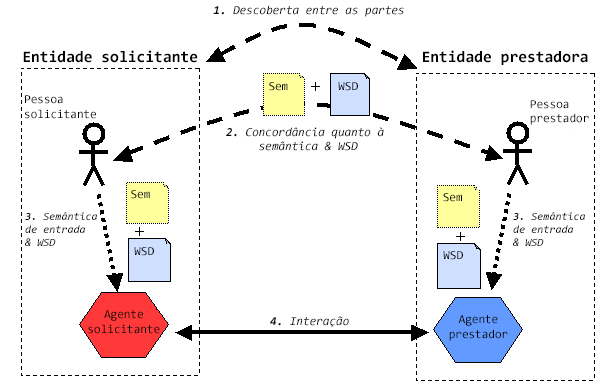
<style>
.page{position:relative;width:609px;height:391px;background:#ffffff}
.page>*{position:absolute;margin:0}
.t1{font:12px "Consolas-Italic";color:#000000}
.t2{font:12px "Consolas-BoldItalic";color:#000000}
.t3{font:16px "Consolas-Bold";color:#000000}
.t4{font:12px "Consolas";color:#000000}
.t5{font:11px "Consolas-Italic";color:#000000}
.t6{font:11px "Consolas-BoldItalic";color:#000000}
</style>
<div class="page">
<p class="t1" style="left:213px;top:5px;width:191px;height:12px"><span class="t2">1.</span> Descoberta entre as partes</p>
<p class="t3" style="left:23px;top:50px;width:175px;height:13px">Entidade solicitante</p>
<p class="t3" style="left:423px;top:50px;width:165px;height:15px">Entidade prestadora</p>
<p class="t4" style="left:269px;top:82px;width:19px;height:9px">Sem</p>
<p class="t4" style="left:338px;top:82px;width:20px;height:9px">WSD</p>
<p class="t4" style="left:25px;top:95px;width:71px;height:24px">Pessoa<br>solicitante</p>
<p class="t4" style="left:530px;top:100px;width:59px;height:25px">Pessoa<br>prestador</p>
<p class="t1" style="left:226px;top:127px;width:158px;height:24px;text-align:center"><span class="t2">2. </span>Concordância quanto à <br>semântica &amp; WSD</p>
<p class="t4" style="left:131px;top:190px;width:19px;height:9px">Sem</p>
<p class="t4" style="left:443px;top:193px;width:19px;height:9px">Sem</p>
<p class="t5" style="left:25px;top:212px;width:72px;height:34px"><span class="t6">3. </span>Semântica<br>de entrada<br>&amp; WSD</p>
<p class="t5" style="left:513px;top:212px;width:72px;height:34px"><span class="t6">3. </span>Semântica<br>de entrada<br>&amp; WSD</p>
<p class="t4" style="left:134px;top:247px;width:20px;height:9px">WSD</p>
<p class="t4" style="left:443px;top:251px;width:20px;height:9px">WSD</p>
<p class="t4" style="left:88px;top:310px;width:72px;height:24px;text-align:center">Agente<br>solicitante</p>
<p class="t1" style="left:270px;top:316px;width:79px;height:11px"><span class="t2">4.</span> Interação</p>
<p class="t4" style="left:449px;top:315px;width:59px;height:26px;text-align:center">Agente<br>prestador</p>
</div>
